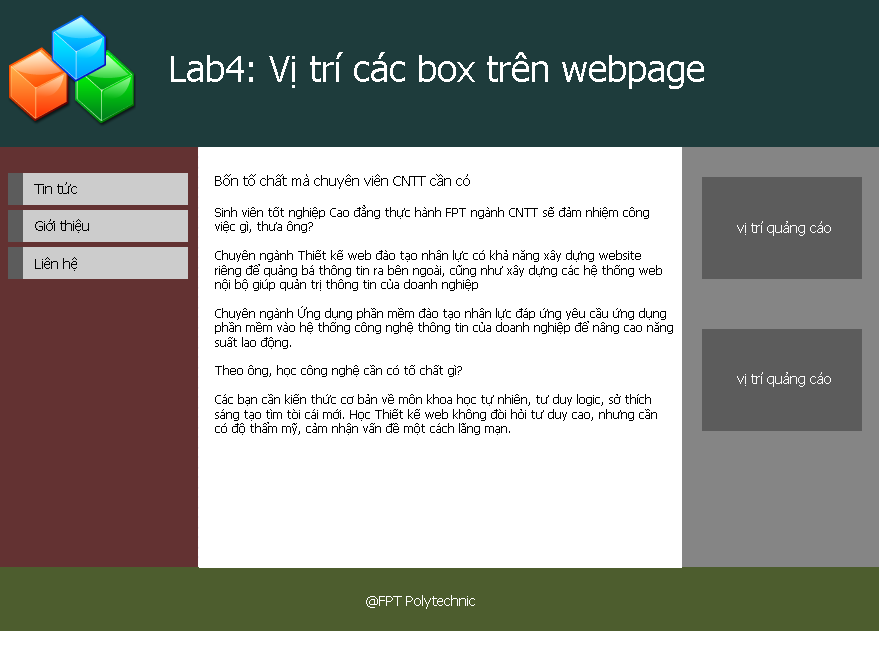
<style>
.page{position:relative;width:879px;height:668px;background:#ffffff}
.page>*{position:absolute;margin:0}
.t1{font:36px "Tahoma";color:#ffffff}
.t2{font:14px "Tahoma";color:#000000}
.t3{font:12px "Tahoma";color:#000000}
.t4{font:14px "Tahoma";color:#fbfbfb}
.t5{font:14px "Tahoma";color:#fefefe}
</style>
<div class="page">
<p class="t1" style="left:171px;top:52px;width:533px;height:37px">Lab4: Vị trí các box trên webpage</p>
<p class="t2" style="left:215px;top:174px;width:255px;height:15px">Bốn tố chất mà chuyên viên CNTT cần có</p>
<p class="t2" style="left:34px;top:182px;width:43px;height:12px">Tin tức</p>
<p class="t3" style="left:215px;top:205px;width:458px;height:230px">Sinh viên tốt nghiệp Cao đẳng thực hành FPT ngành CNTT sẽ đảm nhiệm công <br>việc gì, thưa ông?<br><br>Chuyên ngành Thiết kế web đào tạo nhân lực có khả năng xây dựng website <br>riêng để quảng bá thông tin ra bên ngoài, cũng như xây dựng các hệ thống web <br>nội bộ giúp quản trị thông tin của doanh nghiệp<br><br>Chuyên ngành Ứng dụng phần mềm đào tạo nhân lực đáp ứng yêu cầu ứng dụng <br>phần mềm vào hệ thống công nghệ thông tin của doanh nghiệp để nâng cao năng <br>suất lao động.<br><br>Theo ông, học công nghệ cần có tố chất gì?<br><br>Các bạn cần kiến thức cơ bản về môn khoa học tự nhiên, tư duy logic, sở thích <br>sáng tạo tìm tòi cái mới. Học Thiết kế web không đòi hỏi tư duy cao, nhưng cần <br>có độ thẩm mỹ, cảm nhận vấn đề một cách lãng mạn.</p>
<p class="t2" style="left:35px;top:219px;width:54px;height:14px">Giới thiệu</p>
<p class="t4" style="left:737px;top:221px;width:94px;height:15px">vị trí quảng cáo</p>
<p class="t2" style="left:35px;top:257px;width:42px;height:14px">Liên hệ</p>
<p class="t4" style="left:737px;top:372px;width:94px;height:15px">vị trí quảng cáo</p>
<p class="t5" style="left:366px;top:595px;width:109px;height:14px">@FPT Polytechnic</p>
</div>
